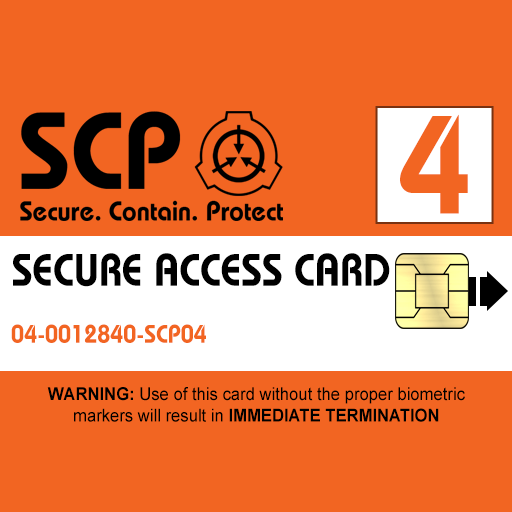
<style>
.page{position:relative;width:512px;height:512px;background:#f26522}
.page>*{position:absolute;margin:0}
.t1{font:138.7px "BauhausLT-Demi";color:#f26522;scale:0.95 1}
.t2{font:45.5px "BauhausLT-Demi";color:#000000;text-transform:uppercase;scale:0.91 1}
.t3{font:25.5px "BauhausLT-Demi";color:#f26522;scale:0.92 1}
.t4{font:17.8px "ArialMT";color:#000000;scale:0.93 1}
.t5{font:17.8px "Arial-BoldMT";color:#000000;scale:0.93 1}
</style>
<div class="page">
<p class="t1" style="left:400px;top:114px;width:68px;height:100px">4</p>
<p class="t2" style="left:13px;top:253px;width:377px;height:34px">Secure Access Card</p>
<p class="t3" style="left:11px;top:324px;width:195px;height:19px">04-0012840-SCP04</p>
<p class="t4" style="left:47px;top:387px;width:418px;height:35px;text-align:center"><span class="t5">WARNING: </span>Use of this card without the proper biometric<br>markers will result in <span class="t5">IMMEDIATE TERMINATION</span></p>
</div>
